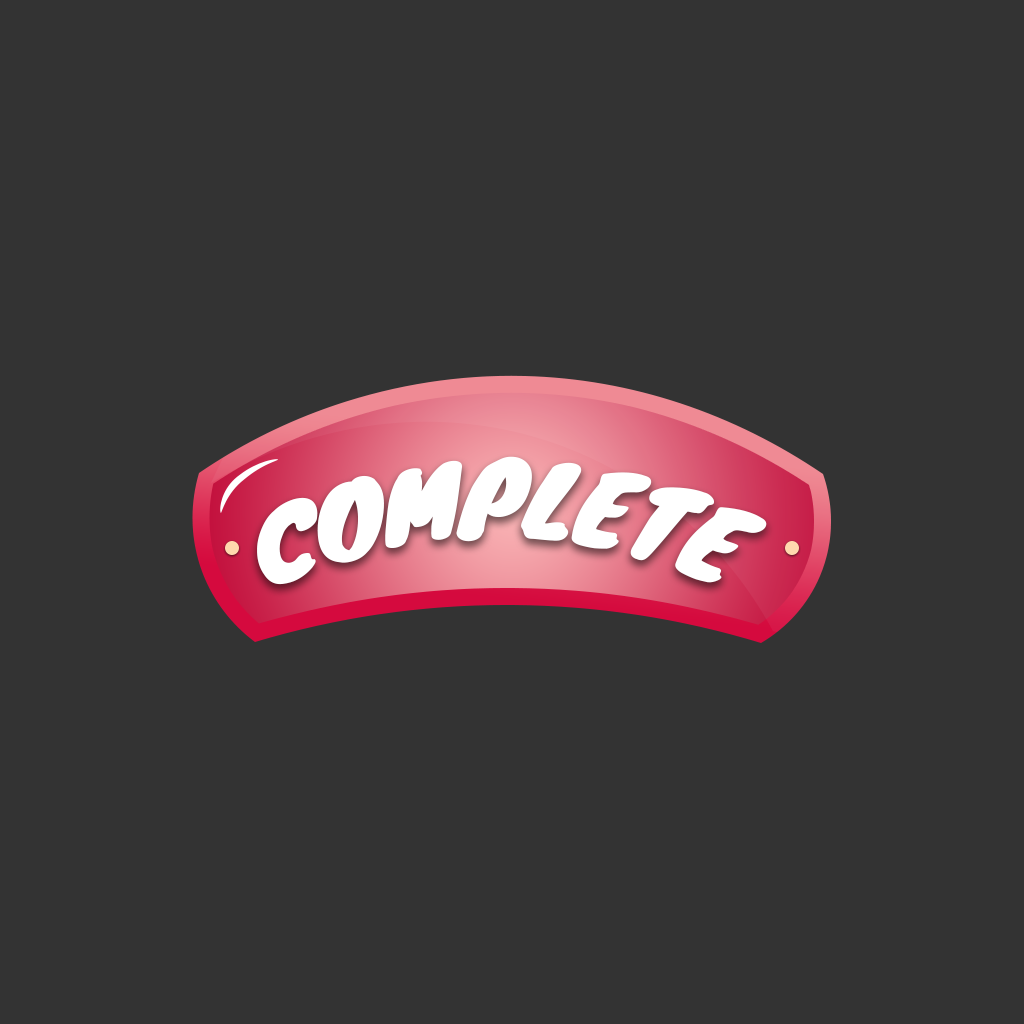
<style>
.page{position:relative;width:1024px;height:1024px;background:#333333}
.page>*{position:absolute;margin:0}
.t1{font:94.1px "Knewave-Regular";color:#ffffff}
</style>
<div class="page">
<p class="t1" style="left:257px;top:456px;width:510px;height:129px">COMPLETE</p>
</div>
